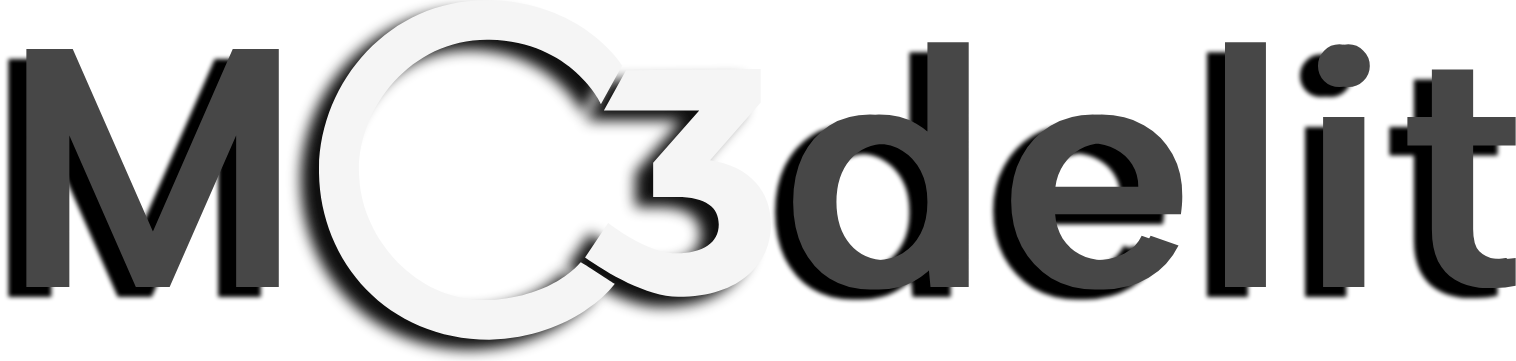
<style>
.page{position:relative;width:1516px;height:361px;background:#ffffff}
.page>*{position:absolute;margin:0}
.t1{font:340px "AlbertSans-Medium";letter-spacing:0.01em;color:#363636;font-weight:bold}
</style>
<div class="page">
<p class="t1" style="left:26px;top:42px;width:1490px;height:248px">M    delit</p>
</div>
